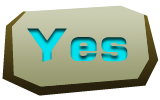
<style>
.page{position:relative;width:160px;height:100px;background:#ffffff}
.page>*{position:absolute;margin:0}
.t1{font:48px "HYk2gj"}
</style>
<div class="page">
<p class="t1" style="left:27px;top:28px;width:101px;height:34px">Yes</p>
</div>
